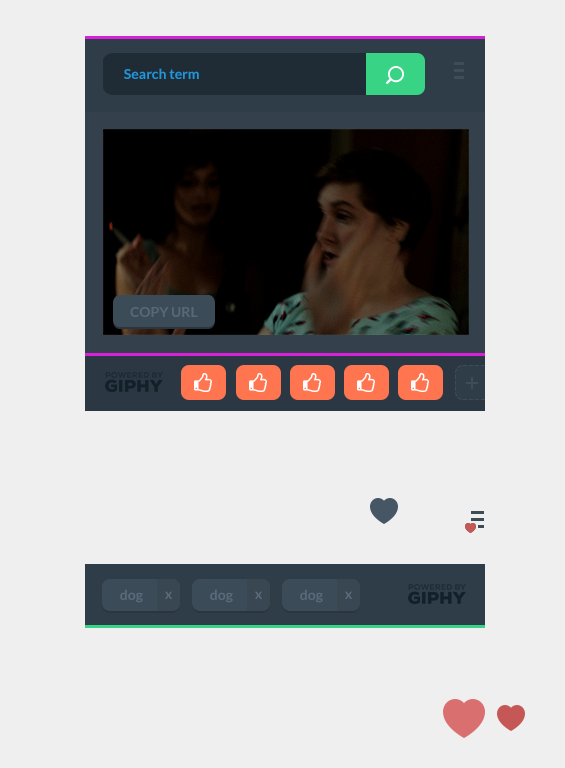
<style>
.page{position:relative;width:565px;height:768px;background:#efefef}
.page>*{position:absolute;margin:0}
.t1{font:14px "Lato-Bold";color:#2196d9}
.t2{font:14px "Lato-Bold";color:#566979}
.t3{font:14px "Lato-Bold";color:#596a7a}
</style>
<div class="page">
<p class="t1" style="left:124px;top:68px;width:75px;height:11px">Search term</p>
<p class="t2" style="left:130px;top:307px;width:68px;height:10px">COPY URL</p>
<p class="t3" style="left:120px;top:589px;width:23px;height:14px">dog</p>
<p class="t3" style="left:165px;top:591px;width:7px;height:8px">x</p>
<p class="t3" style="left:210px;top:589px;width:23px;height:14px">dog</p>
<p class="t3" style="left:255px;top:591px;width:7px;height:8px">x</p>
<p class="t3" style="left:300px;top:589px;width:23px;height:14px">dog</p>
<p class="t3" style="left:345px;top:591px;width:7px;height:8px">x</p>
</div>
